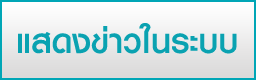
<style>
.page{position:relative;width:256px;height:80px}
.page>*{position:absolute;margin:0}
.t1{font:48px "KittithadaMedium65";color:#0aa2b1}
</style>
<div class="page">
<p class="t1" style="left:18px;top:23px;width:219px;height:31px">แสดงข่าวในระบบ</p>
</div>
